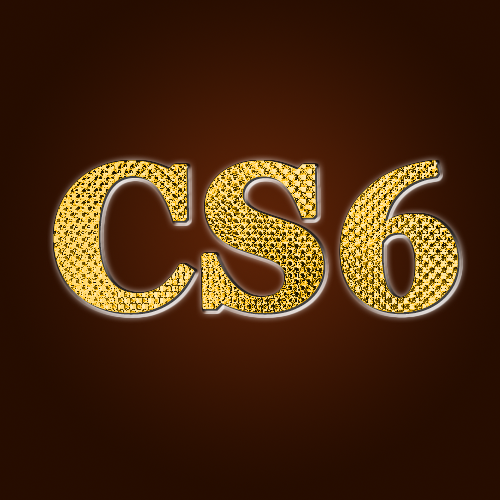
<style>
.page{position:relative;width:500px;height:500px}
.page>*{position:absolute;margin:0}
.t1{font:200px "Georgia-Bold";font-weight:bold}
</style>
<div class="page">
<p class="t1" style="left:55px;top:162px;width:405px;height:153px">CS6</p>
</div>
